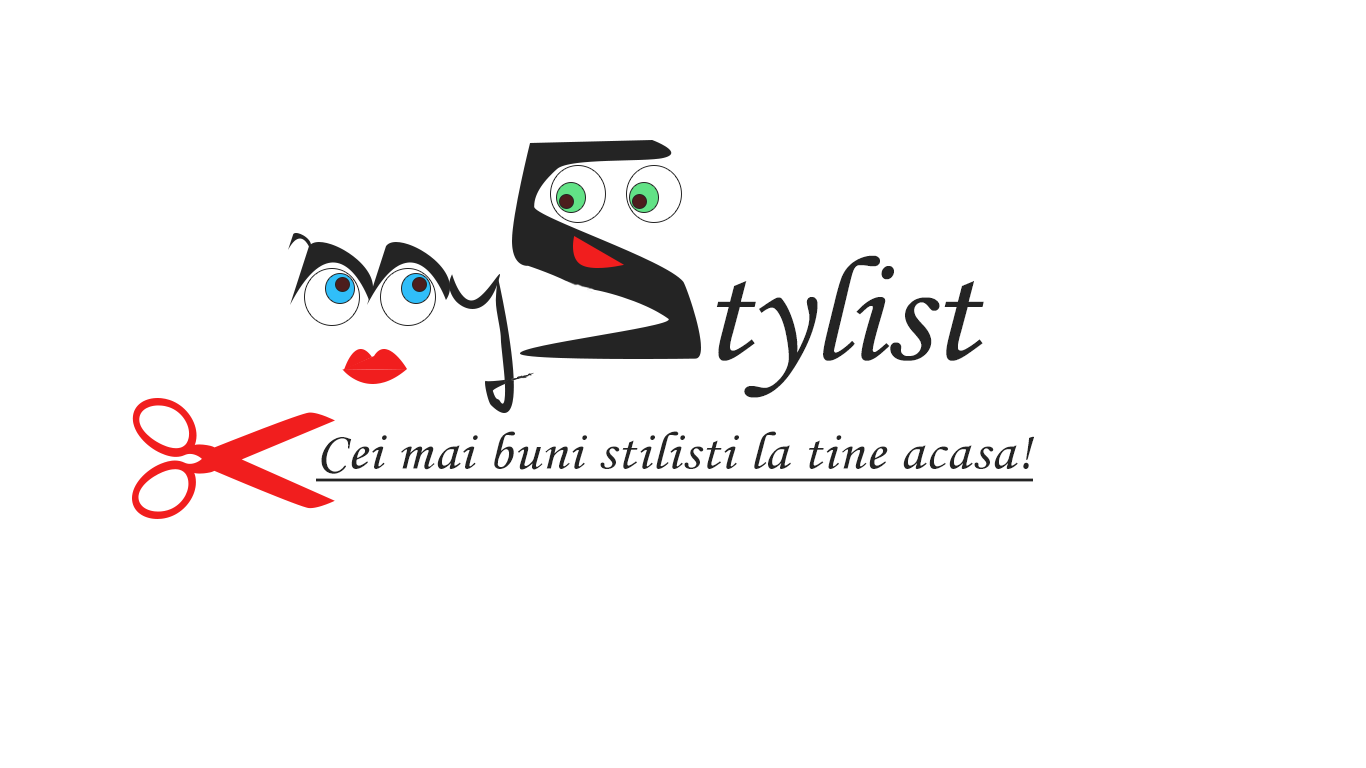
<style>
.page{position:relative;width:1366px;height:768px;background:#ffffff}
.page>*{position:absolute;margin:0}
.t1{font:150px "MonotypeCorsiva";color:#242424}
.t2{font:53.7px "MonotypeCorsiva";letter-spacing:0.02em;color:#242424;text-decoration:underline;scale:1.07 1}
</style>
<div class="page">
<p class="t1" style="left:716px;top:255px;width:268px;height:143px">tylist</p>
<p class="t2" style="left:316px;top:431px;width:718px;height:51px">Cei mai buni stilisti la tine acasa!</p>
</div>
